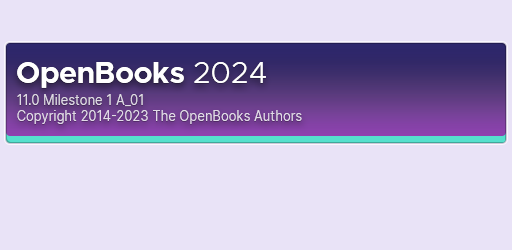
<style>
.page{position:relative;width:512px;height:250px;background:#e9e3f7}
.page>*{position:absolute;margin:0}
.t1{font:30px "Metropolis-Bold";color:#ffffff}
.t2{font:30px "Metropolis-Light";color:#ffffff}
.t3{font:13px "Inter-Regular";color:#e2dae8}
</style>
<div class="page">
<p class="t1" style="left:17px;top:62px;width:249px;height:26px">OpenBooks <span class="t2">2024</span></p>
<p class="t3" style="left:17px;top:94px;width:285px;height:30px">11.0 Milestone 1 A_01<br>Copyright 2014-2023 The OpenBooks Authors</p>
</div>
